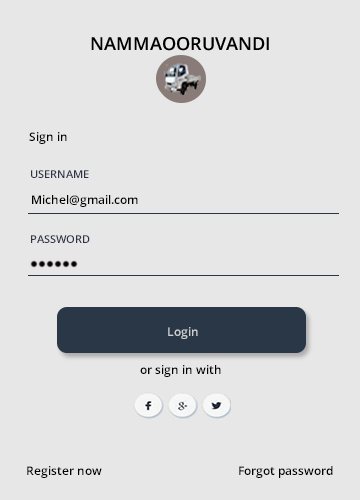
<style>
.page{position:relative;width:360px;height:500px;background:#e7e7e7}
.page>*{position:absolute;margin:0}
.t1{font:12px "OpenSans-Semibold";color:#010000}
.t2{font:11px "OpenSans-Semibold";color:#2c3445}
.t3{font:12px "OpenSans-Semibold";color:#020101}
.t4{font:12px "OpenSans-Semibold";color:#e7e7e7}
.t5{font:12px "OpenSans-Semibold";color:#020000}
.t6{font:12px "OpenSans-Semibold";color:#030101}
</style>
<div class="page">
<p class="t1" style="left:29px;top:132px;width:38px;height:12px">Sign in</p>
<p class="t2" style="left:31px;top:170px;width:58px;height:8px">USERNAME</p>
<p class="t3" style="left:32px;top:195px;width:106px;height:12px">Michel@gmail.com</p>
<p class="t2" style="left:31px;top:235px;width:59px;height:8px">PASSWORD</p>
<p class="t4" style="left:168px;top:327px;width:30px;height:12px;opacity:0.7">Login</p>
<p class="t5" style="left:140px;top:365px;width:81px;height:12px">or sign in with</p>
<p class="t6" style="left:27px;top:466px;width:75px;height:12px">Register now</p>
<p class="t5" style="left:239px;top:466px;width:94px;height:12px">Forgot password</p>
</div>
